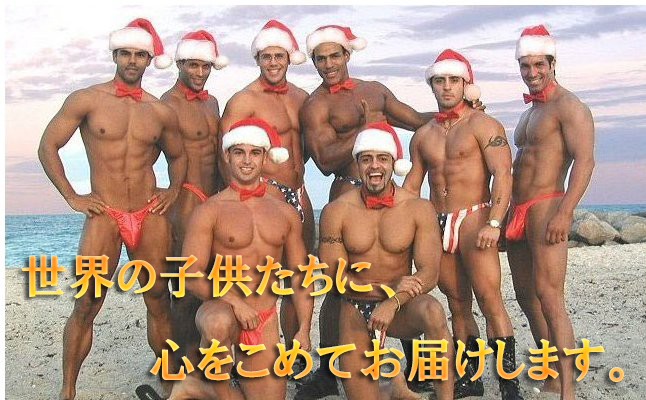
<style>
.page{position:relative;width:646px;height:400px}
.page>*{position:absolute;margin:0}
.t1{font:48px "HGPSoeiPresenceEB"}
</style>
<div class="page">
<p class="t1" style="left:21px;top:253px;width:603px;height:129px">世界の子供たちに、<br>　　　　心をこめてお届けします。</p>
</div>
